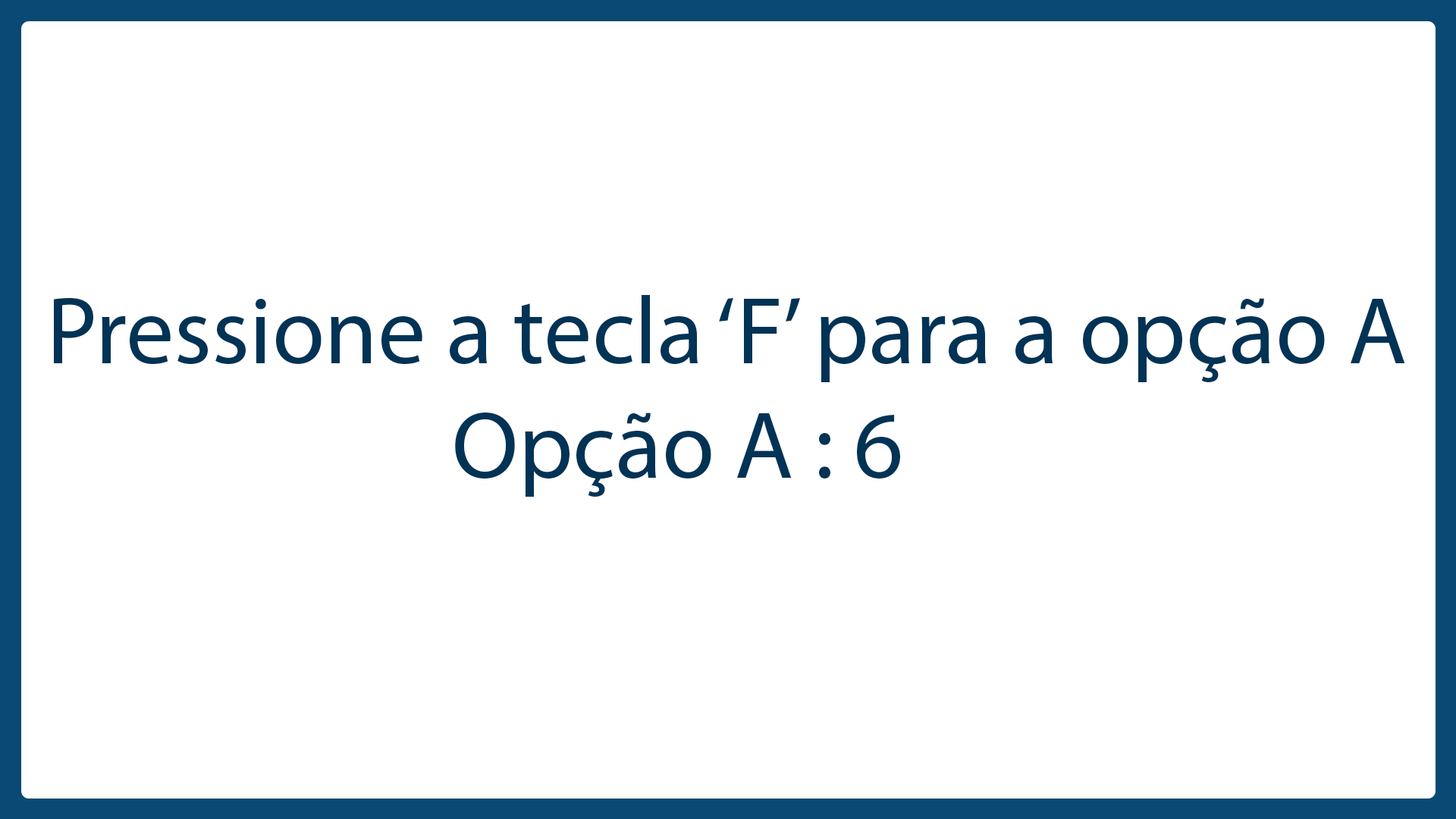
<style>
.page{position:relative;width:1456px;height:819px;background:#ffffff}
.page>*{position:absolute;margin:0}
.t1{font:95.9px "MyriadPro-Regular";color:#003355}
</style>
<div class="page">
<p class="t1" style="left:54px;top:295px;width:1351px;height:202px">Pressione a tecla ‘F’ para a opção A<br>                    Opção A : 6</p>
</div>
